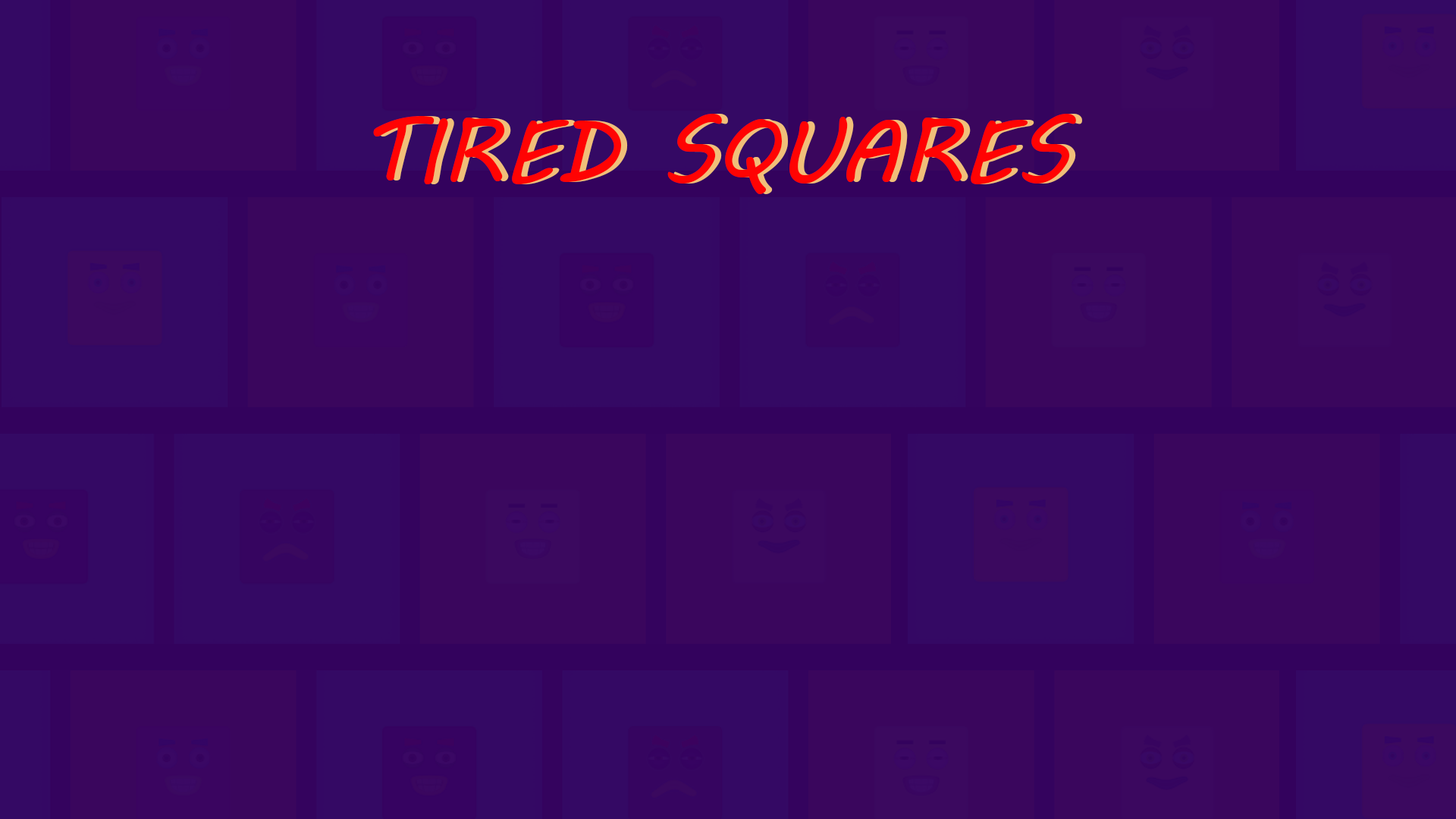
<style>
.page{position:relative;width:1456px;height:819px;background:#3a065d}
.page>*{position:absolute;margin:0}
.t1{font:88.5px "MVBoli";color:#ff0303}
.t2{font:88.5px "MVBoli"}
</style>
<div class="page">
<p class="t1" style="left:373px;top:114px;width:703px;height:80px">TIRED SQUARES</p>
<p class="t2" style="left:379px;top:114px;width:703px;height:80px">TIRED SQUARES</p>
</div>
